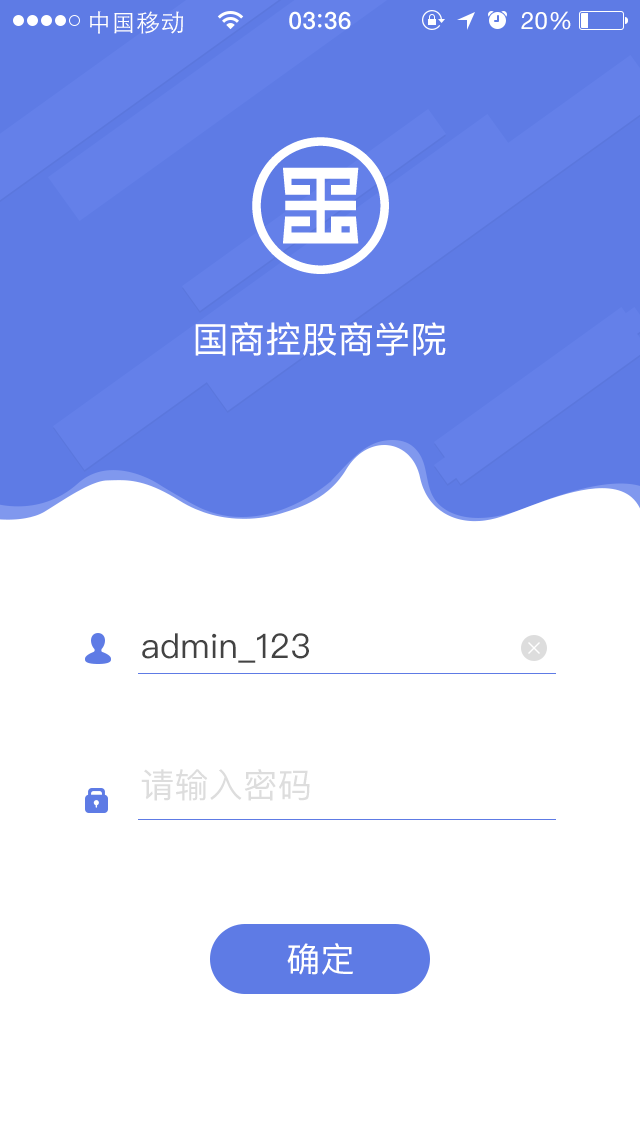
<style>
.page{position:relative;width:640px;height:1136px;background:#ffffff}
.page>*{position:absolute;margin:0}
.t1{font:24px "STHeitiSC-Light";letter-spacing:0.02em;color:#ffffff}
.t2{font:24px "HelveticaNeue-Medium";letter-spacing:0.03em;color:#ffffff}
.t3{font:24px "HelveticaNeue";letter-spacing:0.02em;color:#ffffff}
.t4{font:36px "PingFangSC-Regular";letter-spacing:0.01em;color:#ffffff}
.t5{font:34px "PingFangSC-Regular";letter-spacing:0.01em;color:#434343}
.t6{font:34px "PingFangSC-Regular";letter-spacing:0.01em;color:#dddddd}
.t7{font:34px "PingFangSC-Regular";letter-spacing:0.01em;color:#ffffff}
</style>
<div class="page">
<p class="t1" style="left:90px;top:11px;width:93px;height:23px">中国移动</p>
<p class="t2" style="left:289px;top:11px;width:62px;height:19px">03 36</p>
<p class="t3" style="left:521px;top:11px;width:50px;height:19px">20%</p>
<p class="t4" style="left:195px;top:322px;width:251px;height:34px">国商控股商学院</p>
<p class="t5" style="left:142px;top:633px;width:167px;height:30px">admin_123</p>
<p class="t6" style="left:141px;top:769px;width:169px;height:32px">请输入密码</p>
<p class="t7" style="left:287px;top:943px;width:66px;height:32px">确定</p>
</div>
